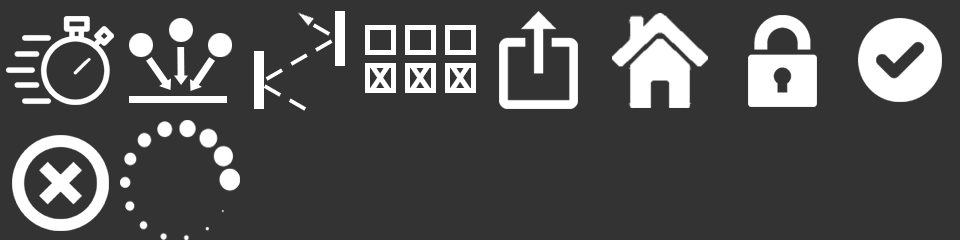
<style>
.page{position:relative;width:960px;height:240px;background:#333333}
.page>*{position:absolute;margin:0}
.t1{font:37.3px "AldotheApache";color:#ffffff}
.t2{font:37.3px "Arial-BoldMT";color:#ffffff}
</style>
<div class="page">
<p class="t1" style="left:312px;top:23px;width:19px;height:13px;rotate:30deg">_</p>
<p class="t1" style="left:265px;top:39px;width:68px;height:42px;rotate:150deg">_ _ _</p>
<p class="t2" style="left:370px;top:68px;width:21px;height:20px">x</p>
<p class="t2" style="left:410px;top:68px;width:21px;height:20px">x</p>
<p class="t2" style="left:450px;top:68px;width:21px;height:20px">x</p>
<p class="t1" style="left:263px;top:84px;width:44px;height:27px;rotate:30deg">_ _</p>
</div>
